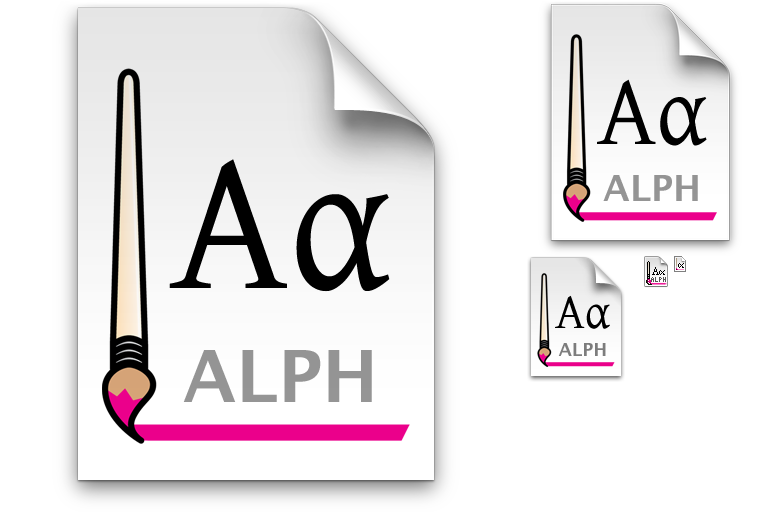
<style>
.page{position:relative;width:768px;height:512px;background:#ffffff}
.page>*{position:absolute;margin:0}
.t1{font:100px "Constructium";color:#000000}
.t2{font:200px "Constructium";color:#000000}
.t3{font:36px "LucidaGrande-Bold";color:#959595}
.t4{font:7px "KKFixed4x7";color:#555555}
.t5{font:50px "Constructium";color:#000000}
.t6{font:72px "LucidaGrande-Bold";color:#959595}
.t7{font:18px "LucidaGrande-Bold";color:#7d7d7d}
</style>
<div class="page">
<p class="t1" style="left:597px;top:79px;width:110px;height:67px">Αα</p>
<p class="t2" style="left:169px;top:159px;width:221px;height:133px">Αα</p>
<p class="t3" style="left:603px;top:175px;width:95px;height:26px">ALPH</p>
<p class="t4" style="left:651px;top:277px;width:15px;height:5px">ALPH</p>
<p class="t5" style="left:555px;top:295px;width:55px;height:34px">Αα</p>
<p class="t6" style="left:183px;top:350px;width:189px;height:52px">ALPH</p>
<p class="t7" style="left:558px;top:343px;width:48px;height:13px">ALPH</p>
</div>
